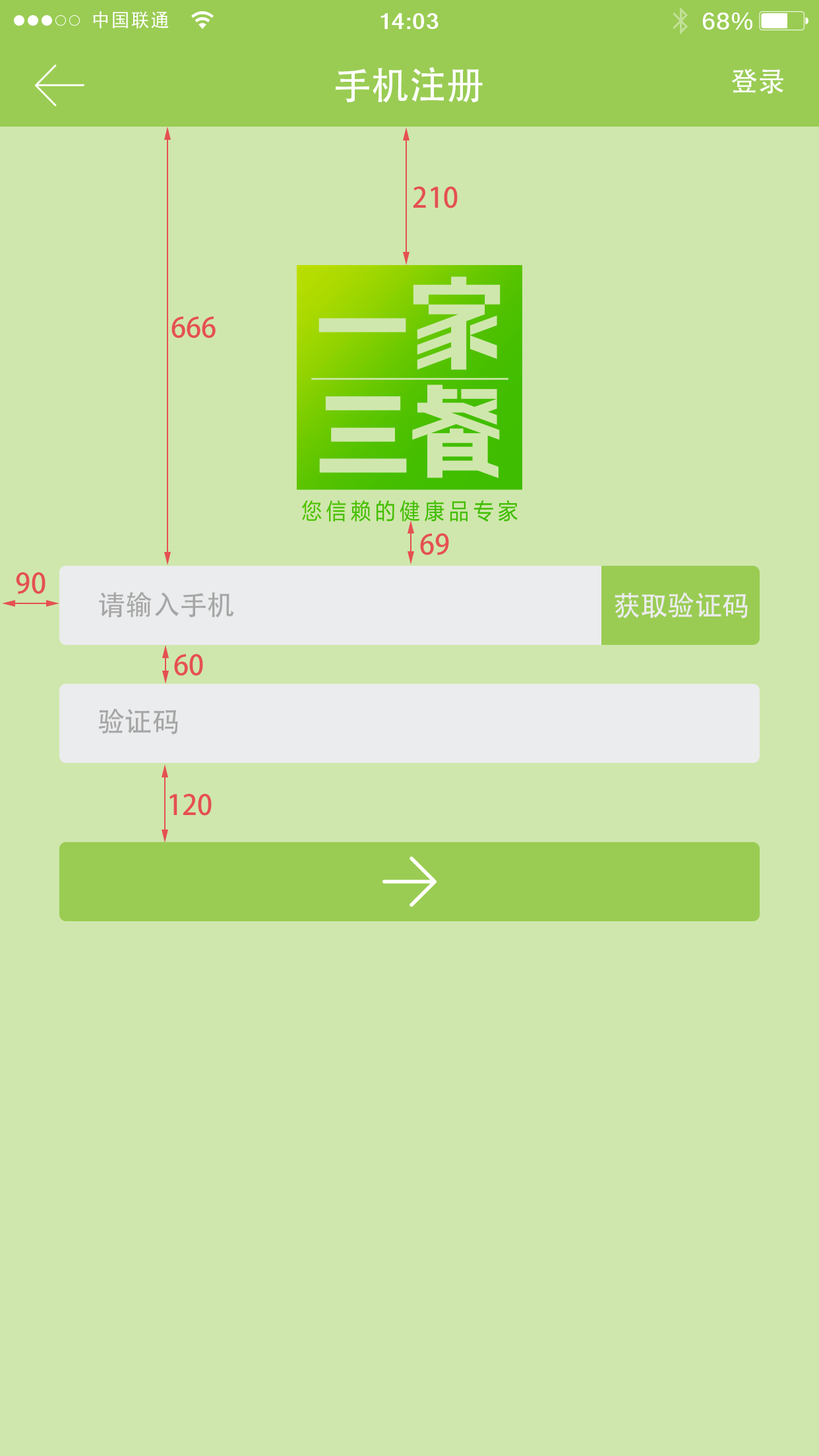
<style>
.page{position:relative;width:819px;height:1456px;background:#cfe7ac}
.page>*{position:absolute;margin:0}
.t1{font:38.2px "AdobeHeitiStd-Regular";color:#fefffe}
.t2{font:27.7px "AdobeHeitiStd-Regular";color:#fefffe}
.t3{font:27.7px "AdobeHeitiStd-Regular";color:#e55053}
.t4{font:27.7px "AdobeHeitiStd-Regular";color:#a6a6a6}
.t5{font:27.7px "AdobeHeitiStd-Regular";color:#ebeced}
</style>
<div class="page">
<p class="t1" style="left:336px;top:67px;width:147px;height:36px">手机注册</p>
<p class="t2" style="left:731px;top:69px;width:52px;height:25px">登录</p>
<p class="t3" style="left:413px;top:186px;width:45px;height:22px">210</p>
<p class="t3" style="left:171px;top:317px;width:45px;height:21px">666</p>
<p class="t3" style="left:420px;top:533px;width:29px;height:22px">69</p>
<p class="t3" style="left:16px;top:572px;width:29px;height:22px">90</p>
<p class="t4" style="left:99px;top:591px;width:135px;height:27px">请输入手机</p>
<p class="t5" style="left:615px;top:592px;width:133px;height:27px">获取验证码</p>
<p class="t3" style="left:174px;top:653px;width:29px;height:23px">60</p>
<p class="t4" style="left:98px;top:708px;width:80px;height:27px">验证码</p>
<p class="t3" style="left:169px;top:793px;width:43px;height:23px">120</p>
</div>
